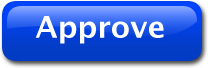
<style>
.page{position:relative;width:208px;height:68px}
.page>*{position:absolute;margin:0}
.t1{font:30px "LucidaGrande-Bold";color:#ffffff}
</style>
<div class="page">
<p class="t1" style="left:35px;top:16px;width:129px;height:28px">Approve</p>
</div>
